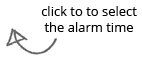
<style>
.page{position:relative;width:142px;height:61px;background:#ffffff}
.page>*{position:absolute;margin:0}
.t1{font:13px "OpenSans";color:#000000}
</style>
<div class="page">
<p class="t1" style="left:41px;top:6px;width:96px;height:26px;text-align:center">click to to select<br>the alarm time</p>
</div>
